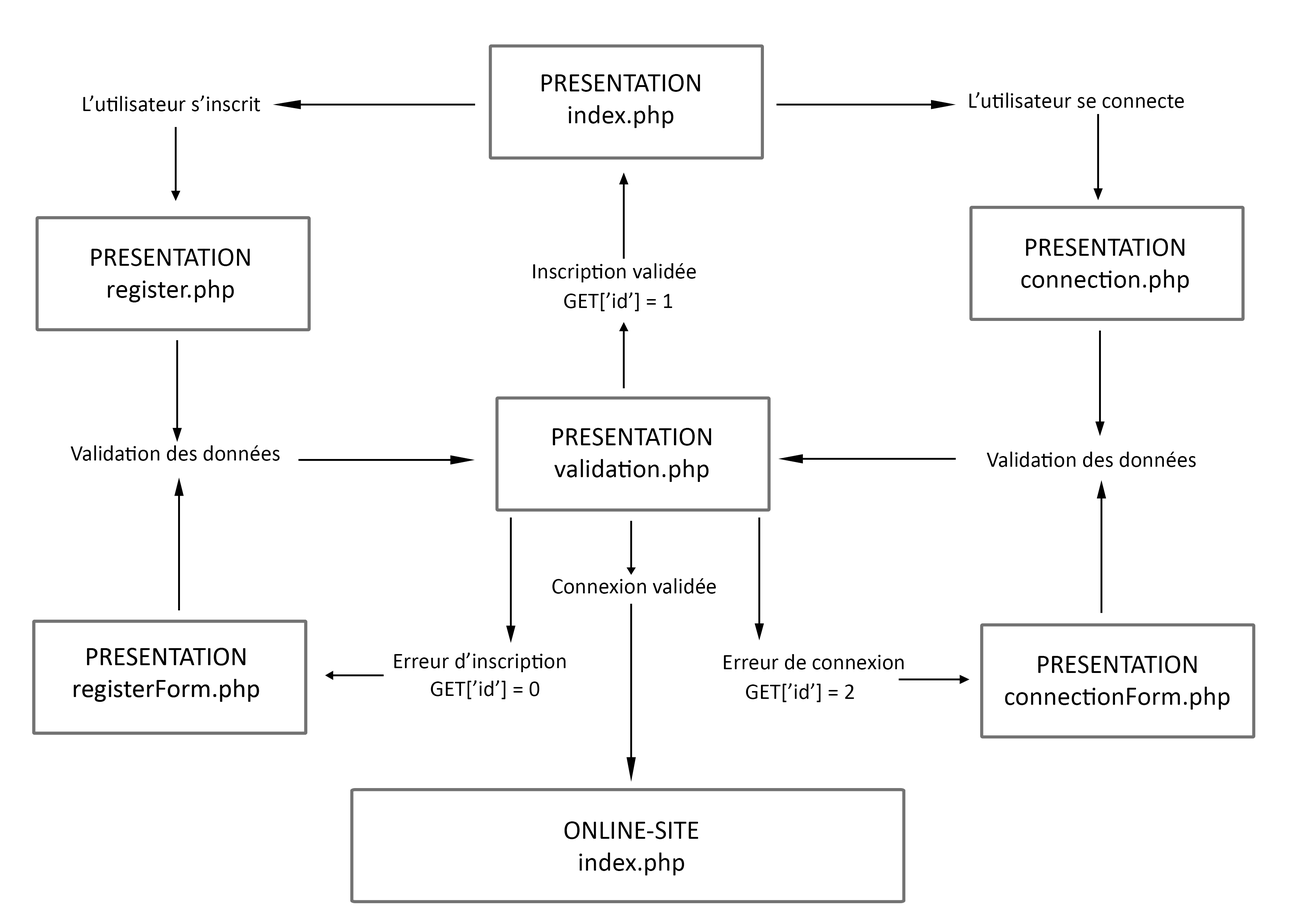
<style>
.page{position:relative;width:1299px;height:918px;background:#ffffff}
.page>*{position:absolute;margin:0}
.t1{font:26.7px "Calibri";letter-spacing:0.002em;color:#000000}
.t2{font:22.2px "Calibri";letter-spacing:0.002em;color:#000000}
</style>
<div class="page">
<p class="t1" style="left:542px;top:74px;width:158px;height:54px;text-align:center">PRESENTATION<br>index.php</p>
<p class="t2" style="left:83px;top:96px;width:177px;height:15px">L’utilisateur s’inscrit</p>
<p class="t2" style="left:969px;top:92px;width:215px;height:16px">L’utilisateur se connecte</p>
<p class="t1" style="left:1021px;top:238px;width:168px;height:54px;text-align:center">PRESENTATION<br>connection.php</p>
<p class="t1" style="left:91px;top:248px;width:159px;height:54px;text-align:center">PRESENTATION<br>register.php</p>
<p class="t2" style="left:533px;top:263px;width:163px;height:19px">Inscription validée</p>
<p class="t2" style="left:564px;top:292px;width:108px;height:19px">GET[’id’] = 1</p>
<p class="t1" style="left:553px;top:428px;width:158px;height:54px;text-align:center">PRESENTATION<br>validation.php</p>
<p class="t2" style="left:71px;top:445px;width:209px;height:16px">Validation des données</p>
<p class="t2" style="left:987px;top:452px;width:208px;height:15px">Validation des données</p>
<p class="t2" style="left:552px;top:578px;width:164px;height:16px">Connexion validée</p>
<p class="t1" style="left:74px;top:648px;width:185px;height:54px;text-align:center">PRESENTATION<br>registerForm.php</p>
<p class="t1" style="left:74px;top:648px;width:185px;height:54px;text-align:center">PRESENTATION<br>registerForm.php</p>
<p class="t2" style="left:394px;top:653px;width:172px;height:19px">Erreur d’inscription</p>
<p class="t2" style="left:724px;top:654px;width:180px;height:16px">Erreur de connexion</p>
<p class="t1" style="left:1005px;top:656px;width:225px;height:54px;text-align:center">PRESENTATION<br>connectionForm.php</p>
<p class="t2" style="left:431px;top:680px;width:108px;height:19px">GET[’id’] = 0</p>
<p class="t2" style="left:746px;top:683px;width:108px;height:19px">GET[’id’] = 2</p>
<p class="t1" style="left:564px;top:822px;width:134px;height:54px;text-align:center">ONLINE-SITE<br>index.php</p>
</div>
